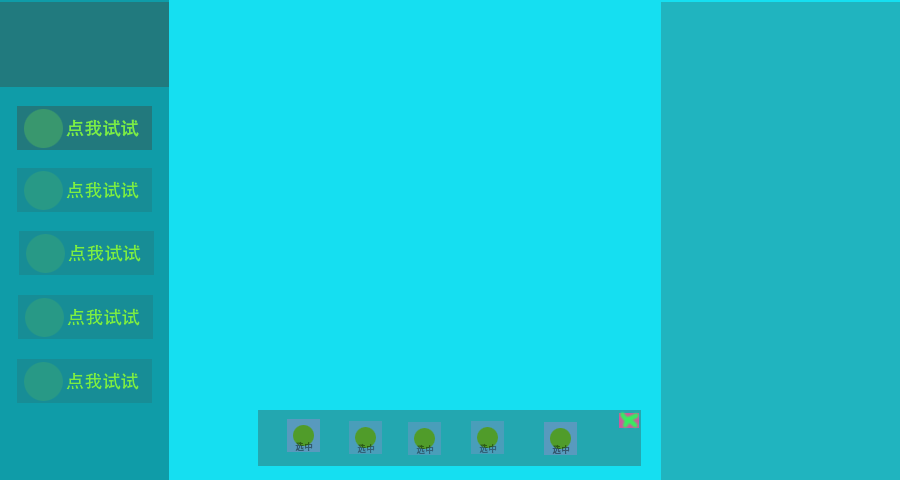
<style>
.page{position:relative;width:900px;height:480px;background:#15dff1}
.page>*{position:absolute;margin:0}
.t1{font:18.3px "AdobeHeitiStd-Regular";color:#7bee42}
.t2{font:9.1px "AdobeHeitiStd-Regular";color:#325a70}
</style>
<div class="page">
<p class="t1" style="left:66px;top:119px;width:73px;height:18px">点我试试</p>
<p class="t2" style="left:295px;top:441px;width:18px;height:10px">选中</p>
</div>
